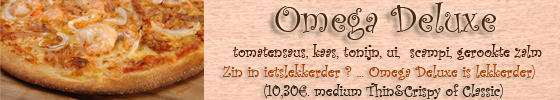
<style>
.page{position:relative;width:560px;height:100px}
.page>*{position:absolute;margin:0}
.t1{font:40px "CurlzMT";color:#522211}
.t2{font:16px "CurlzMT";color:#3f190b}
.t3{font:16px "CurlzMT";color:#b83b04}
</style>
<div class="page">
<p class="t1" style="left:275px;top:2px;width:221px;height:38px">Omega Deluxe</p>
<p class="t2" style="left:233px;top:44px;width:309px;height:16px">tomatensaus, kaas, tonijn, ui,  scampi, gerookte zalm</p>
<p class="t3" style="left:222px;top:64px;width:313px;height:35px;text-align:center">Zin in ietslekkerder ? ... Omega Deluxe is lekkerder)   <br><span class="t2">(10,30€. medium Thin&amp;Crispy of Classic)</span></p>
</div>
